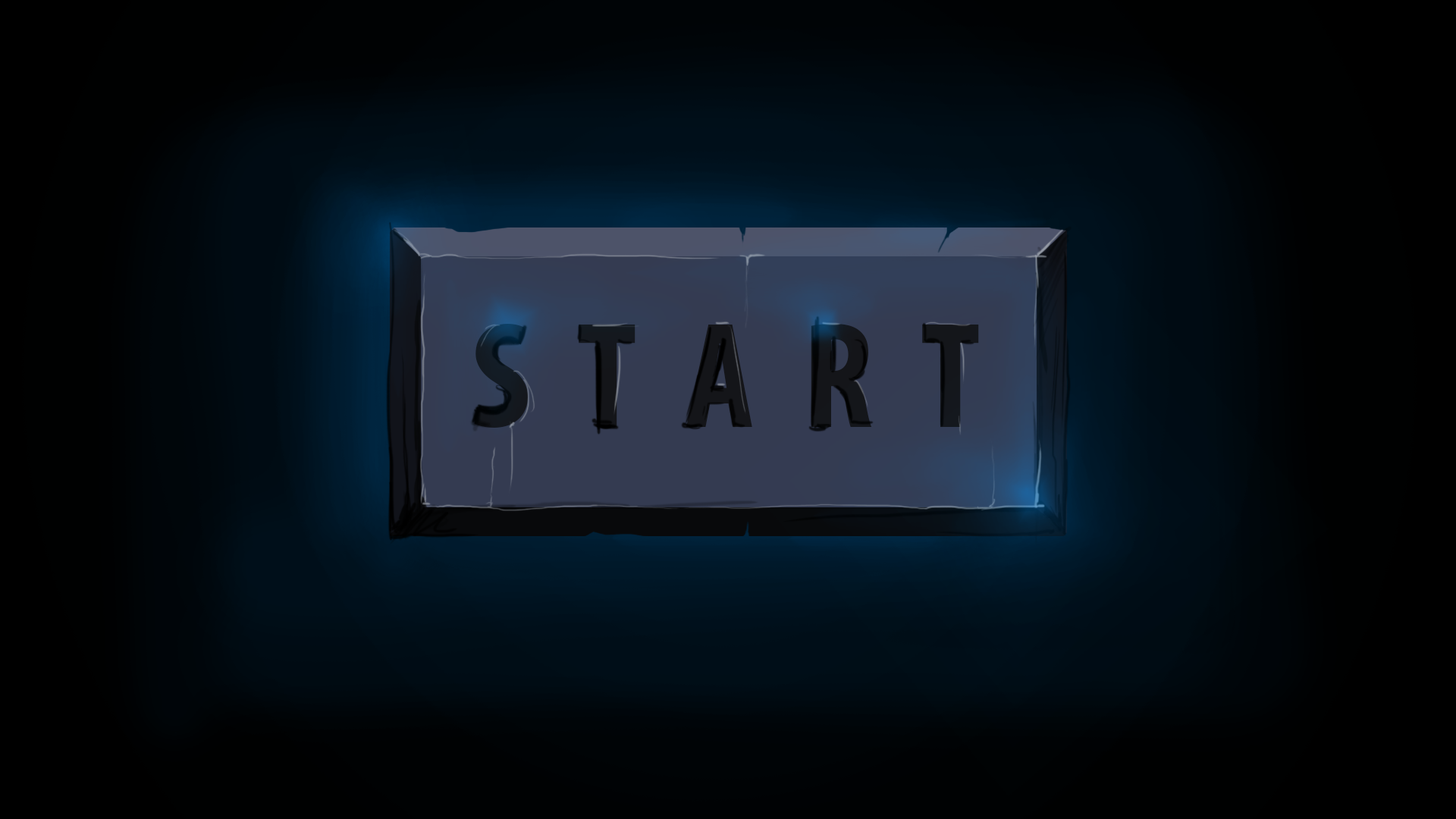
<style>
.page{position:relative;width:1456px;height:819px}
.page>*{position:absolute;margin:0}
.t1{font:151.7px "MyriadPro-BoldCond";color:#141519}
</style>
<div class="page">
<p class="t1" style="left:474px;top:323px;width:505px;height:105px">S  T  A  R  T</p>
</div>
